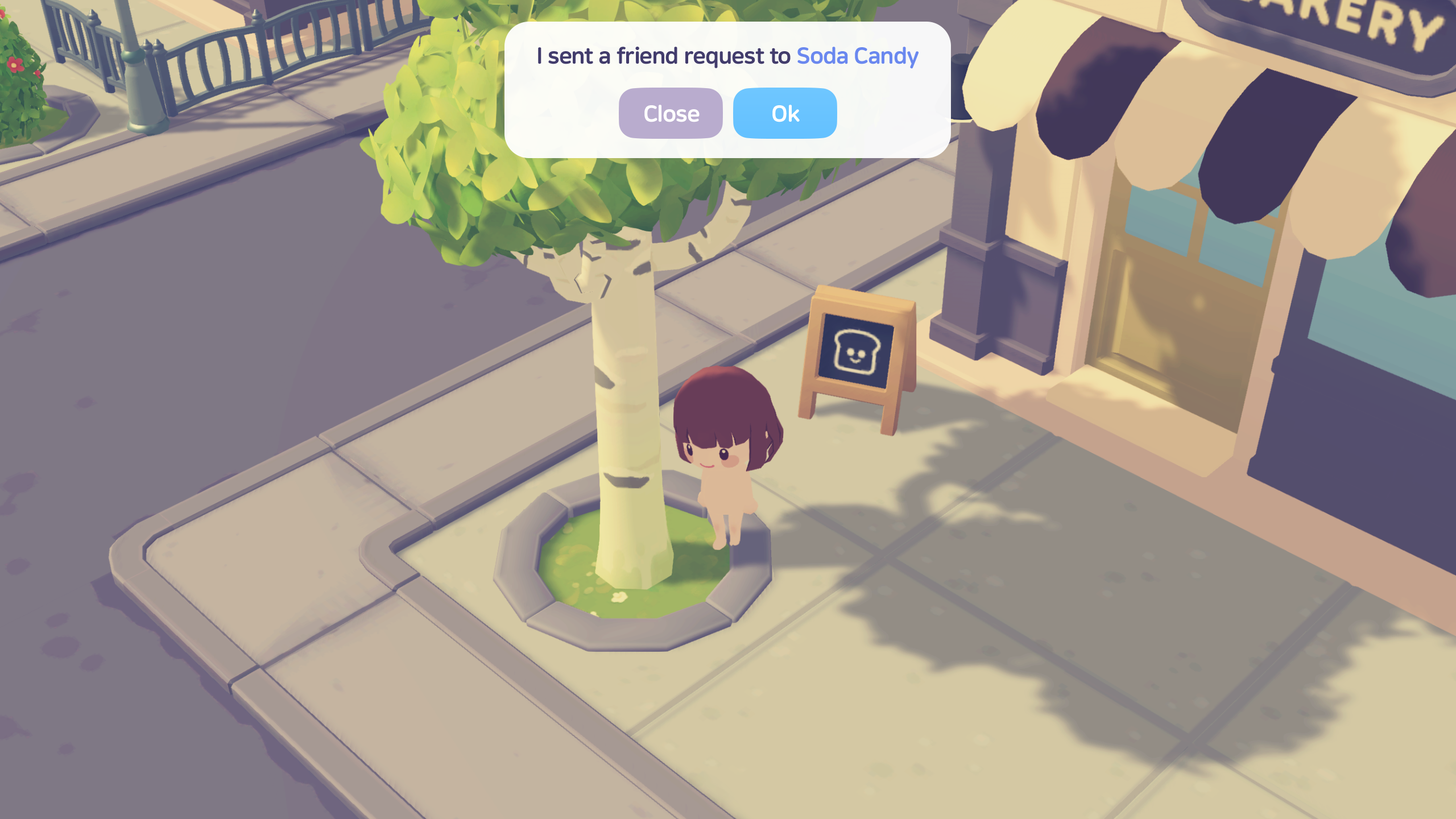
<style>
.page{position:relative;width:1456px;height:819px}
.page>*{position:absolute;margin:0}
.t1{font:22.7px "NanumSquareRoundEB";letter-spacing:-0.02em;color:#423c6c}
.t2{font:22.7px "NanumSquareRoundEB";letter-spacing:-0.02em;color:#6a88ef}
.t3{font:22.7px "NanumSquareRoundEB";letter-spacing:-0.02em;color:#ffffff}
</style>
<div class="page">
<p class="t1" style="left:538px;top:47px;width:381px;height:22px">I sent a friend request to <span class="t2">Soda Candy</span></p>
<p class="t3" style="left:644px;top:105px;width:56px;height:17px">Close</p>
<p class="t3" style="left:772px;top:105px;width:28px;height:17px">Ok</p>
</div>
